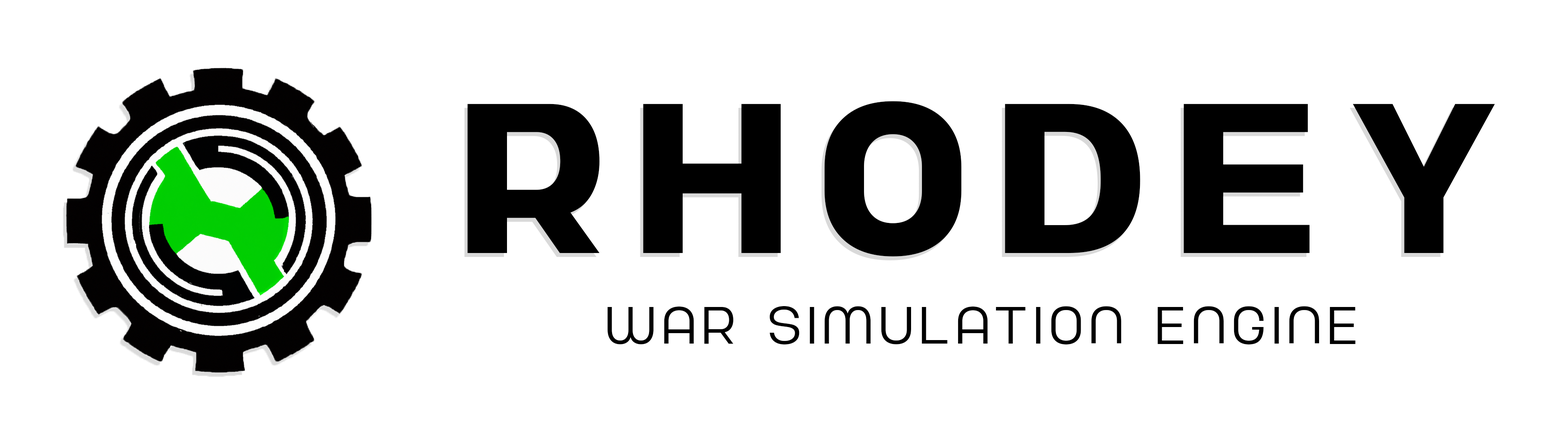
<style>
.page{position:relative;width:1568px;height:435px;background:#ffffff}
.page>*{position:absolute;margin:0}
.t1{font:213.1px "Nura-Bold";letter-spacing:0.125em;color:#000000}
.t2{font:52.3px "Nura-Light";letter-spacing:0.125em;color:#000000}
</style>
<div class="page">
<p class="t1" style="left:467px;top:101px;width:1028px;height:156px">RHODEY</p>
<p class="t2" style="left:607px;top:306px;width:749px;height:39px">War SimulaTion Engine</p>
</div>
